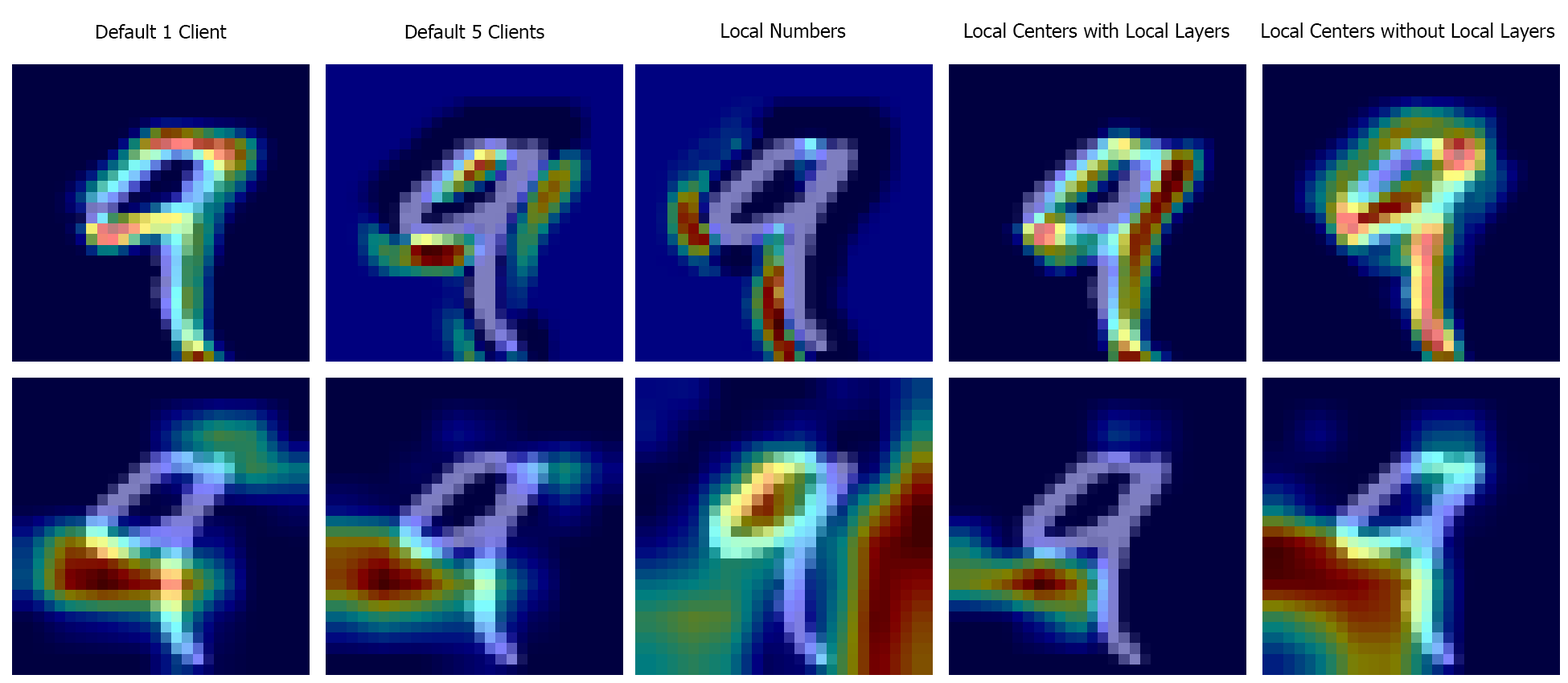
<style>
.page{position:relative;width:1568px;height:683px;background:#000040}
.page>*{position:absolute;margin:0}
.t1{font:18.2px "Tahoma";color:#000000;scale:1.06 1}
.t2{font:19.3px "Tahoma";color:#000000}
</style>
<div class="page">
<p class="t1" style="left:96px;top:24px;width:131px;height:15px">Default 1 Client</p>
<p class="t1" style="left:405px;top:24px;width:139px;height:15px">Default 5 Clients</p>
<p class="t2" style="left:721px;top:23px;width:125px;height:15px">Local Numbers</p>
<p class="t2" style="left:964px;top:23px;width:265px;height:19px">Local Centers with Local Layers</p>
<p class="t2" style="left:1262px;top:23px;width:293px;height:19px">Local Centers without Local Layers</p>
</div>
